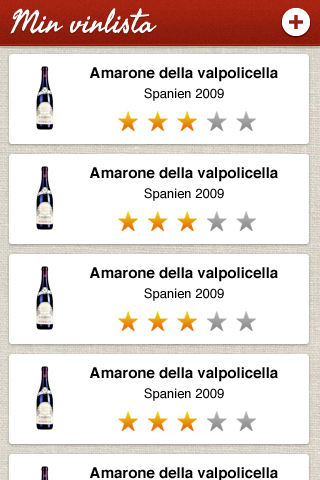
<style>
.page{position:relative;width:320px;height:480px;background:#ffffff}
.page>*{position:absolute;margin:0}
.t1{font:15px/50px "Helvetica-Bold";color:#000000}
.t2{font:13px/20px "Helvetica";color:#000000}
</style>
<div class="page">
<p class="t1" style="left:89px;top:67px;width:189px;height:34px;text-align:center">Amarone della valpolicella<br><span class="t2">Spanien 2009</span></p>
<p class="t1" style="left:89px;top:167px;width:189px;height:34px;text-align:center">Amarone della valpolicella<br><span class="t2">Spanien 2009</span></p>
<p class="t1" style="left:89px;top:267px;width:189px;height:34px;text-align:center">Amarone della valpolicella<br><span class="t2">Spanien 2009</span></p>
<p class="t1" style="left:89px;top:367px;width:189px;height:34px;text-align:center">Amarone della valpolicella<br><span class="t2">Spanien 2009</span></p>
</div>
